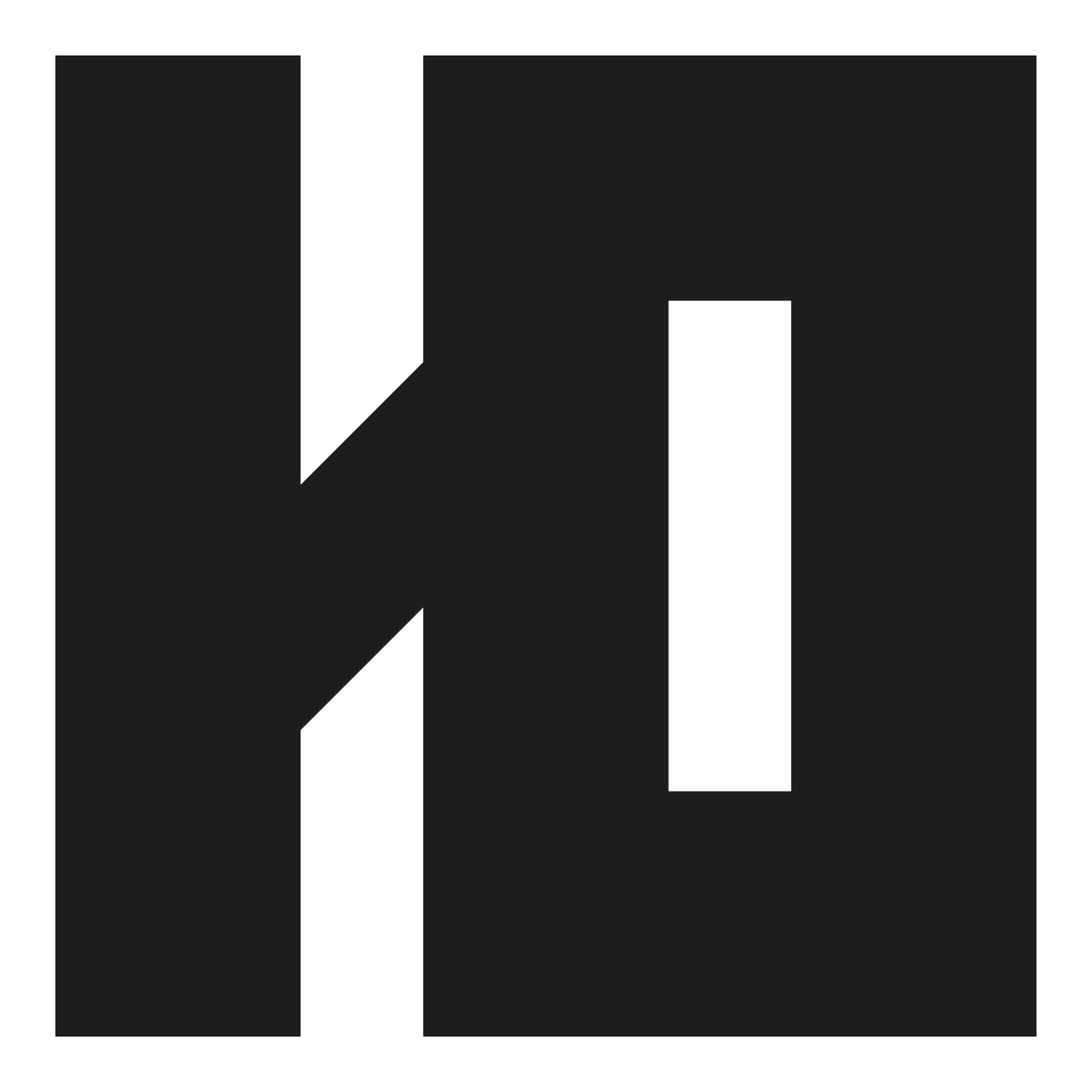
<style>
.page{position:relative;width:1092px;height:1092px;background:#1c1d1f}
.page>*{position:absolute;margin:0}
.t1{font:1962.2px "Metadannye";color:#1c1d1f}
</style>
<div class="page">
<p class="t1" style="left:55px;top:55px;width:982px;height:982px">ю</p>
</div>
